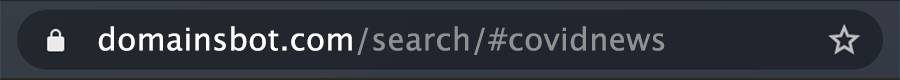
<style>
.page{position:relative;width:900px;height:80px;background:#21262e}
.page>*{position:absolute;margin:0}
.t1{font:31px "LucidaGrande";letter-spacing:0.01em;color:#909192}
.t2{font:31px "LucidaGrande";letter-spacing:0.01em;color:#ffffff}
</style>
<div class="page">
<p class="t1" style="left:98px;top:26px;width:567px;height:29px"><span class="t2">domainsbot.com</span>/search/#covidnews</p>
</div>
